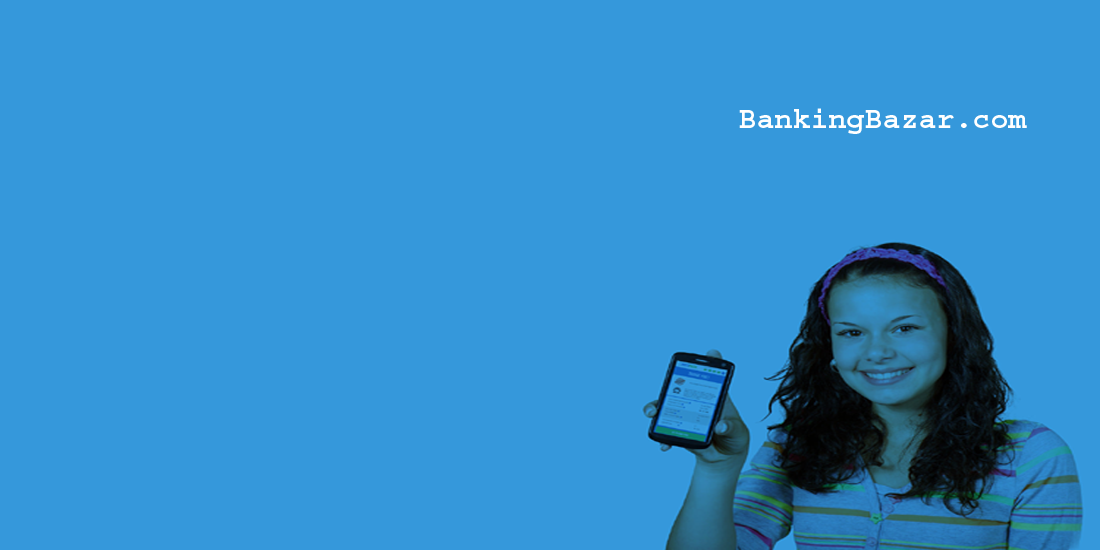
<style>
.page{position:relative;width:1100px;height:550px;background:#3598db}
.page>*{position:absolute;margin:0}
.t1{font:30px "Courier-Bold";color:#ffffff}
</style>
<div class="page">
<p class="t1" style="left:739px;top:108px;width:288px;height:26px">BankingBazar.com</p>
</div>
